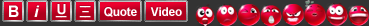
<style>
.page{position:relative;width:369px;height:26px;background:#333333}
.page>*{position:absolute;margin:0}
.t1{font:16px "Arial-BoldMT";letter-spacing:-0.025em;color:#ffffff}
.t2{font:16px "Arial-BoldItalicMT";letter-spacing:-0.025em;color:#ffffff}
.t3{font:14px "Arial-BoldMT";letter-spacing:-0.025em;color:#ffffff}
.t4{font:12px "Arial-BoldMT";letter-spacing:-0.025em;color:#ffffff;scale:0.8 1}
.t5{font:12px "Arial-BoldMT";letter-spacing:-0.025em;color:#ffffff;scale:0.96 1}
.t6{font:12px "Arial-BoldMT";letter-spacing:-0.025em;color:#ffffff}
</style>
<div class="page">
<p class="t1" style="left:9px;top:5px;width:10px;height:12px">B</p>
<p class="t2" style="left:34px;top:5px;width:6px;height:12px">i</p>
<p class="t3" style="left:57px;top:4px;width:9px;height:11px">U</p>
<p class="t4" style="left:79px;top:6px;width:12px;height:2px">__</p>
<p class="t4" style="left:55px;top:16px;width:12px;height:2px">__</p>
<p class="t4" style="left:79px;top:16px;width:12px;height:2px">__</p>
<p class="t5" style="left:82px;top:11px;width:7px;height:2px">_</p>
<p class="t6" style="left:104px;top:7px;width:33px;height:10px">Quote</p>
<p class="t6" style="left:150px;top:7px;width:32px;height:9px">Video</p>
</div>
